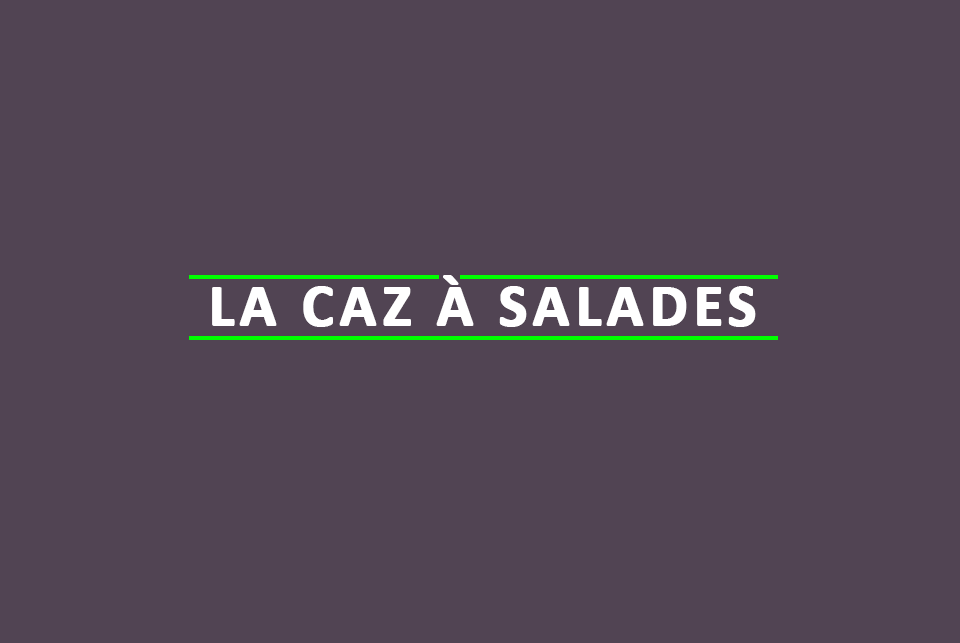
<style>
.page{position:relative;width:960px;height:643px;background:#514453}
.page>*{position:absolute;margin:0}
.t1{font:60px "Calibri-Bold";letter-spacing:0.075em;color:#ffffff;text-transform:uppercase;font-weight:bold}
</style>
<div class="page">
<p class="t1" style="left:212px;top:275px;width:544px;height:52px">La Caz à salades</p>
</div>
